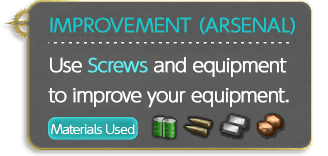
<style>
.page{position:relative;width:328px;height:156px}
.page>*{position:absolute;margin:0}
.t1{font:18px/30px "UDShinGoPro-Light";letter-spacing:-0.04em;color:#ffffff;font-weight:bold}
.t2{font:18px/40px "UDShinGoPro-Light";color:#14c9cb;font-weight:bold}
.t3{font:18px/40px "UDShinGoPro-Light";letter-spacing:-0.04em;color:#ffffff;font-weight:bold}
.t4{font:18px/30px "UDShinGoPro-Light";letter-spacing:-0.04em;color:#5eedf3;font-weight:bold}
.t5{font:12px "UDShinGoPro-Light";letter-spacing:-0.04em;color:#ffffff}
</style>
<div class="page">
<p class="t1" style="left:48px;top:17px;width:247px;height:91px"><span class="t2">IMPROVEMENT (ARSENAL)<br></span><span class="t3">Use </span><span class="t4">Screws</span> and equipment<br>to improve your equipment.</p>
<p class="t5" style="left:51px;top:124px;width:84px;height:10px">Materials Used</p>
</div>
